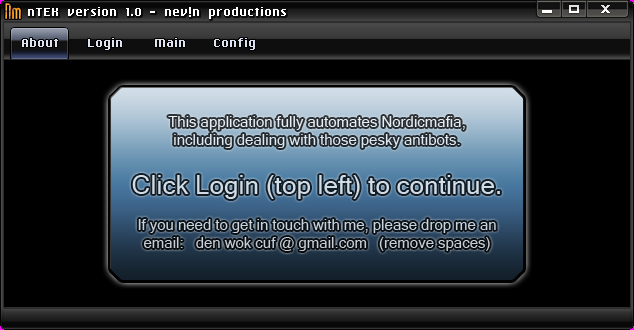
<style>
.page{position:relative;width:634px;height:330px;background:#000000}
.page>*{position:absolute;margin:0}
.t1{font:13px "aqui";color:#ffffff}
.t2{font:13px "aqui";color:#dde3f0}
.t3{font:15px "MicrosoftSansSerif";color:#d1dce6}
.t4{font:26px "MicrosoftSansSerif";color:#d1dce6}
</style>
<div class="page">
<p class="t1" style="left:28px;top:7px;width:258px;height:12px">nTEK version 1.0 - nev!n productions</p>
<p class="t2" style="left:22px;top:38px;width:36px;height:9px">About</p>
<p class="t2" style="left:88px;top:38px;width:34px;height:12px">Login</p>
<p class="t2" style="left:155px;top:38px;width:30px;height:9px">Main</p>
<p class="t2" style="left:214px;top:38px;width:41px;height:12px">Config</p>
<p class="t3" style="left:132px;top:116px;width:368px;height:135px;text-align:center">This application fully automates Nordicmafia,<br>including dealing with those pesky antibots.<br><br><span class="t4">Click Login (top left) to continue.<br></span><br>If you need to get in touch with me, please drop me an<br>email:   den wok cuf @ gmail.com   (remove spaces)</p>
</div>
